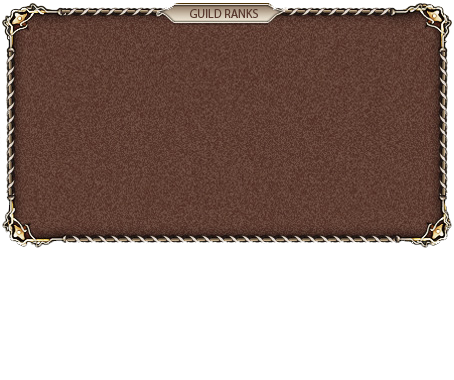
<style>
.page{position:relative;width:454px;height:380px;background:#ffffff}
.page>*{position:absolute;margin:0}
.t1{font:12px "MyriadPro-Regular";color:#5b3b30}
</style>
<div class="page">
<p class="t1" style="left:190px;top:9px;width:68px;height:9px">GUILD RANKS</p>
</div>
